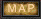
<style>
.page{position:relative;width:41px;height:19px}
.page>*{position:absolute;margin:0}
.t1{font:10.5px "Helvetica-Light";letter-spacing:0.2em;color:#f6d1a3}
</style>
<div class="page">
<p class="t1" style="left:8px;top:4px;width:26px;height:8px">MAP</p>
</div>
